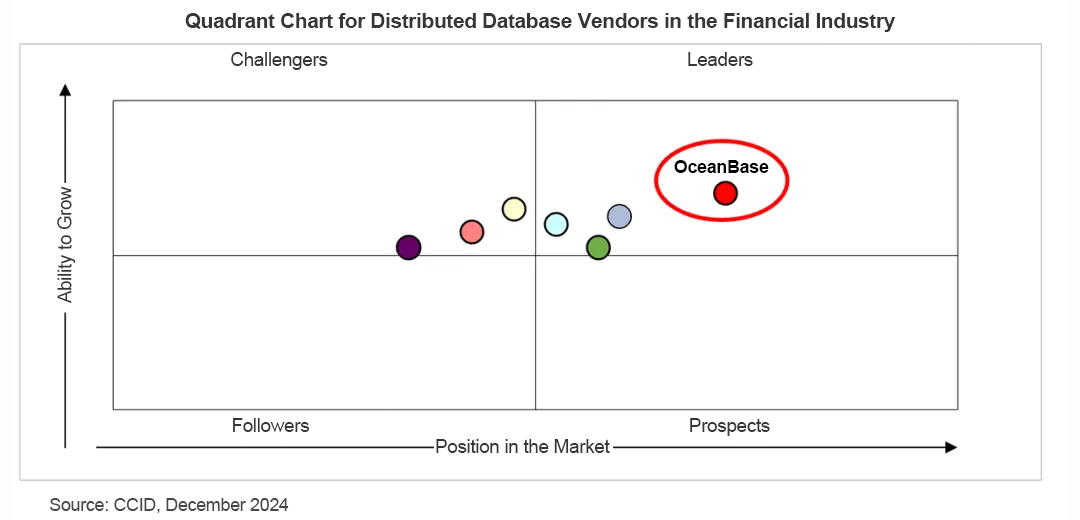
<style>
.page{position:relative;width:1080px;height:520px;background:#ffffff}
.page>*{position:absolute;margin:0}
.t1{font:21px "Arial-BoldMT";letter-spacing:-0.02em;color:#363636}
.t2{font:19px "ArialMT";letter-spacing:-0.02em;color:#363636}
.t3{font:18px "Arial-BoldMT";letter-spacing:-0.02em;color:#010101}
.t4{font:18px "ArialMT";letter-spacing:-0.02em;color:#494747}
</style>
<div class="page">
<p class="t1" style="left:185px;top:13px;width:711px;height:19px">Quadrant Chart for Distributed Database Vendors in the Financial Industry</p>
<p class="t2" style="left:231px;top:52px;width:97px;height:18px">Challengers</p>
<p class="t2" style="left:688px;top:52px;width:65px;height:14px">Leaders</p>
<p class="t3" style="left:674px;top:160px;width:95px;height:13px">OceanBase</p>
<p class="t2" style="left:57px;top:186px;width:19px;height:117px;rotate:-90deg">Ability to Grow</p>
<p class="t2" style="left:233px;top:418px;width:77px;height:14px">Followers</p>
<p class="t2" style="left:690px;top:418px;width:80px;height:18px">Prospects</p>
<p class="t2" style="left:436px;top:439px;width:174px;height:14px">Position in the Market</p>
<p class="t4" style="left:50px;top:498px;width:239px;height:15px">Source: CCID, December 2024</p>
</div>
